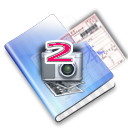
<style>
.page{position:relative;width:128px;height:128px;background:#ffffff}
.page>*{position:absolute;margin:0}
.t1{font:24px "Verdana";letter-spacing:0.1em;color:#ff0066;scale:2 1}
</style>
<div class="page">
<p class="t1" style="left:47px;top:43px;width:25px;height:18px">2</p>
</div>
